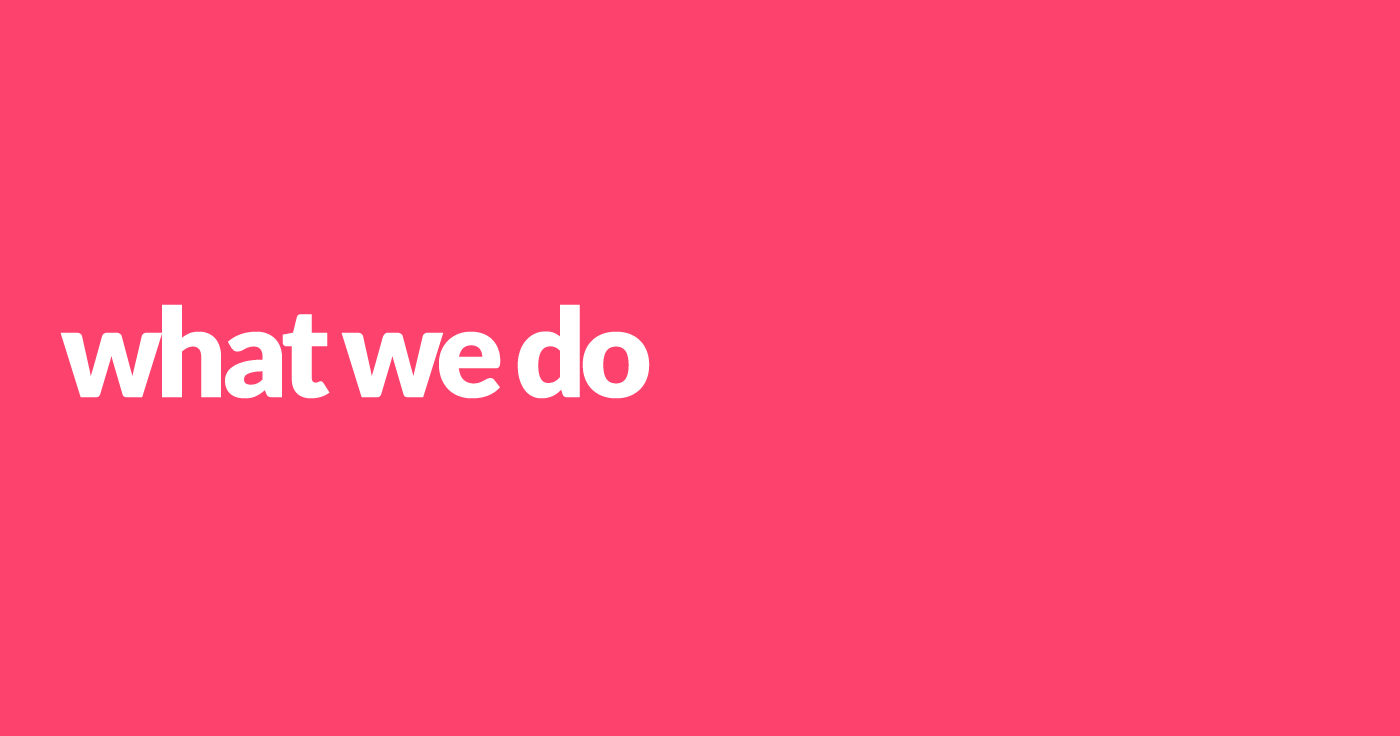
<style>
.page{position:relative;width:1400px;height:736px;background:#fd436d}
.page>*{position:absolute;margin:0}
.t1{font:124.3px "Lato-Black";letter-spacing:-0.08em;color:#ffffff;font-weight:bold}
</style>
<div class="page">
<p class="t1" style="left:60px;top:304px;width:590px;height:95px">what we do</p>
</div>
